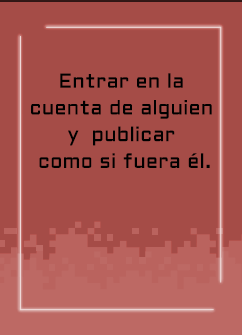
<style>
.page{position:relative;width:242px;height:335px;background:#a54c47}
.page>*{position:absolute;margin:0}
.t1{font:20px/26.7px "Aldrich-Regular";letter-spacing:0.015em;color:#000000}
</style>
<div class="page">
<p class="t1" style="left:31px;top:73px;width:181px;height:95px;text-align:center">Entrar en la <br>cuenta de alguien <br>y  publicar <br>como si fuera él.</p>
</div>
